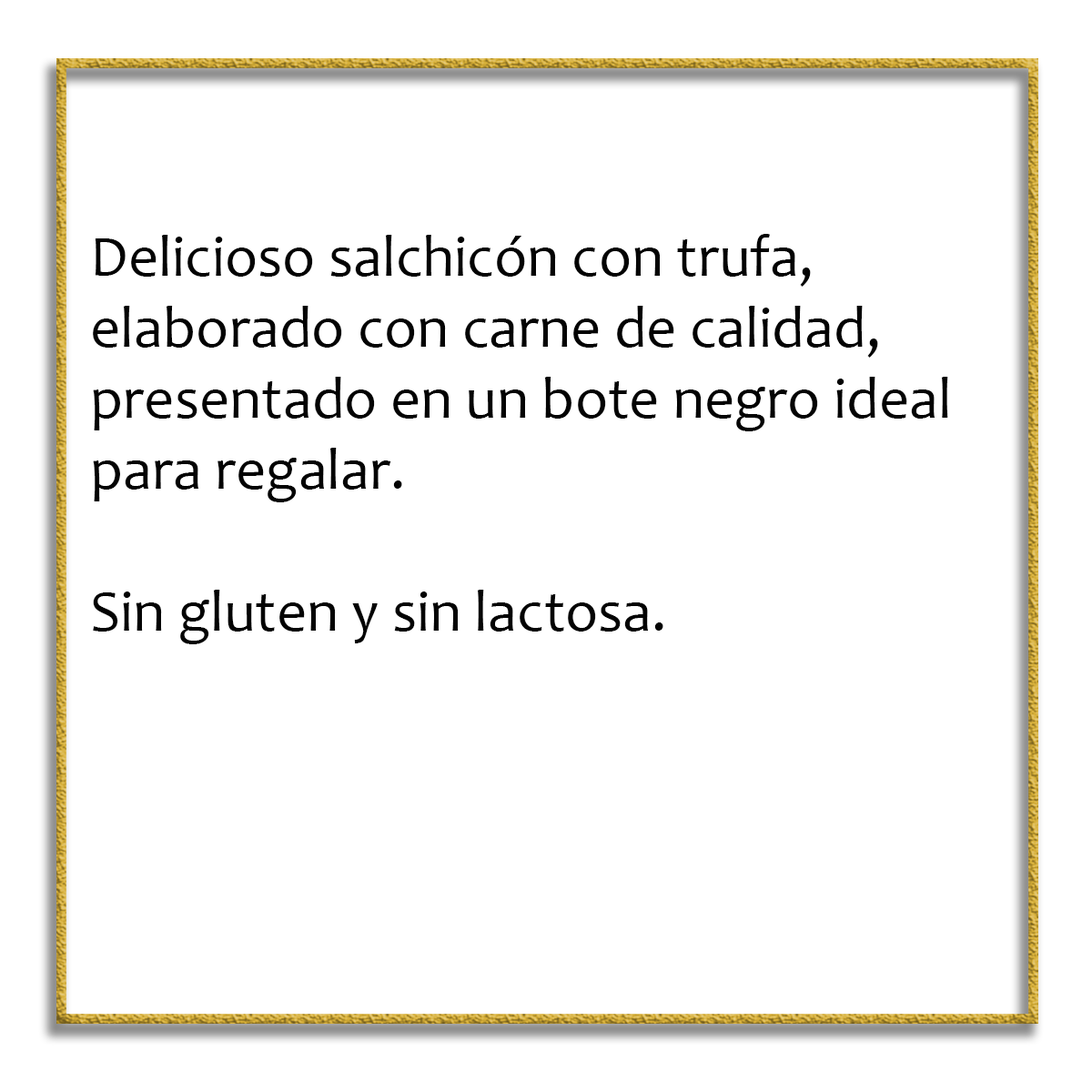
<style>
.page{position:relative;width:1092px;height:1092px;background:#ffffff}
.page>*{position:absolute;margin:0}
.t1{font:59.1px "Candara";color:#030303}
</style>
<div class="page">
<p class="t1" style="left:93px;top:234px;width:855px;height:410px">Delicioso salchicón con trufa, elaborado con carne de calidad, presentado en un bote negro ideal para regalar.<br><br>Sin gluten y sin lactosa.</p>
</div>
